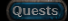
<style>
.page{position:relative;width:68px;height:21px}
.page>*{position:absolute;margin:0}
.t1{font:13.9px "BritannicBold";color:#787a7b;scale:1.12 1}
</style>
<div class="page">
<p class="t1" style="left:12px;top:6px;width:47px;height:11px">Quests</p>
</div>
